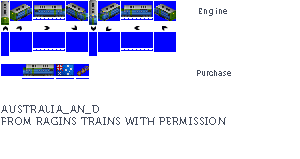
<style>
.page{position:relative;width:300px;height:159px;background:#ffffff}
.page>*{position:absolute;margin:0}
.t1{font:8px "Museo700-Regular";letter-spacing:0.075em;color:#444c5c}
.t2{font:8px "Museo700-Regular";color:#444c5c}
.t3{font:10px "Museo700-Regular";letter-spacing:0.075em;color:#444c5c;text-transform:uppercase}
</style>
<div class="page">
<p class="t1" style="left:199px;top:8px;width:28px;height:8px">Engine</p>
<p class="t2" style="left:197px;top:70px;width:34px;height:6px">Purchase</p>
<p class="t3" style="left:1px;top:105px;width:225px;height:20px">Australia_AN_D<br>from ragins trains with permission</p>
</div>
